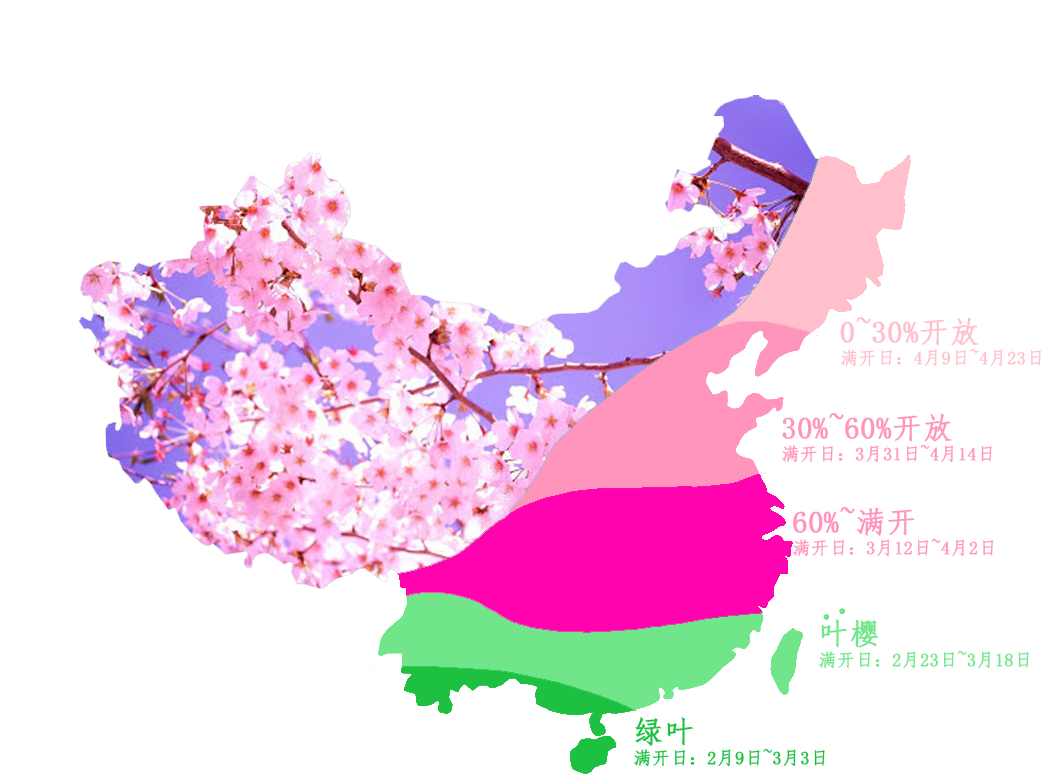
<style>
.page{position:relative;width:1056px;height:779px;background:#ffffff}
.page>*{position:absolute;margin:0}
.t1{font:18px "FangSong";color:#ffc0cb;font-weight:bold}
.t2{font:30px "FangSong";color:#ffc0cb;font-weight:bold}
.t3{font:18px "FangSong";color:#ff94bd;font-weight:bold}
.t4{font:30px "FangSong";color:#ff94bd;font-weight:bold}
.t5{font:18px "FangSong";color:#71e58a;font-weight:bold}
.t6{font:30px "FangSong";color:#71e58a;font-weight:bold}
.t7{font:18px "FangSong";color:#1ec041;font-weight:bold}
.t8{font:30px "FangSong";color:#1ec041;font-weight:bold}
</style>
<div class="page">
<p class="t1" style="left:840px;top:317px;width:201px;height:50px"><span class="t2">0~30%开放<br></span>满开日：4月9日~4月23日</p>
<p class="t3" style="left:782px;top:413px;width:210px;height:50px"><span class="t4">30%~60%开放<br></span>满开日：3月31日~4月14日</p>
<p class="t3" style="left:793px;top:507px;width:201px;height:50px"><span class="t4">60%~满开<br></span>满开日：3月12日~4月2日</p>
<p class="t5" style="left:819px;top:619px;width:210px;height:50px"><span class="t6">叶樱<br></span>满开日：2月23日~3月18日</p>
<p class="t7" style="left:634px;top:717px;width:191px;height:50px"><span class="t8">绿叶<br></span>满开日：2月9日~3月3日</p>
</div>
